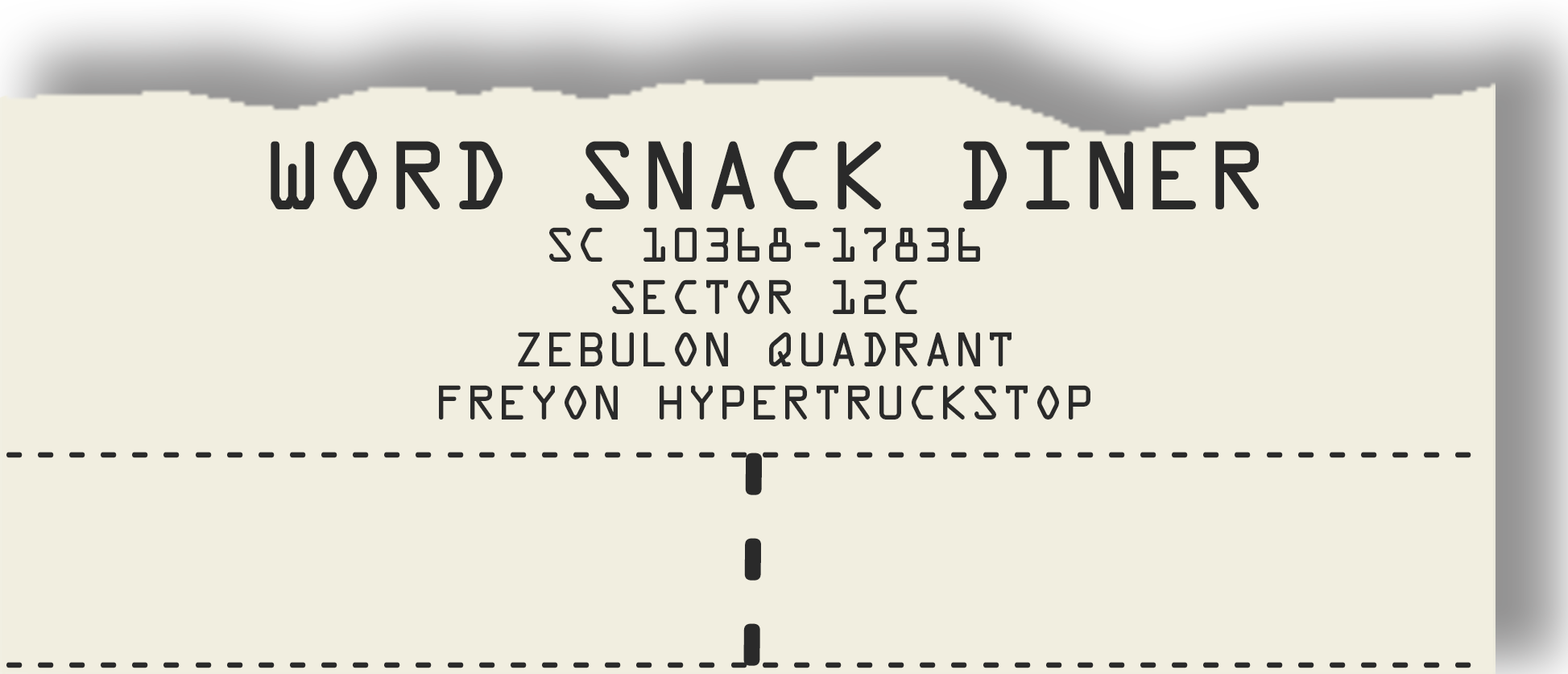
<style>
.page{position:relative;width:1568px;height:674px;background:#f1eee0}
.page>*{position:absolute;margin:0}
.t1{font:43.8px "OCRAStd";color:#2a2a2a}
.t2{font:87.5px "OCRAStd";color:#2a2a2a}
.t3{font:130.6px "OCRAStd";color:#2a2a2a;scale:0.91 1}
</style>
<div class="page">
<p class="t1" style="left:6px;top:141px;width:1465px;height:527px;text-align:center"><span class="t2">WORD SNACK DINER<br></span>SC 10368-17836<br>SECTOR 12C<br>ZEBULON QUADRANT<br>FREYON HYPERTRUCKSTOP<br>-----------------------------------------------<br><br><br><br>-----------------------------------------------</p>
<p class="t3" style="left:743px;top:453px;width:19px;height:213px;rotate:91deg">---</p>
</div>
